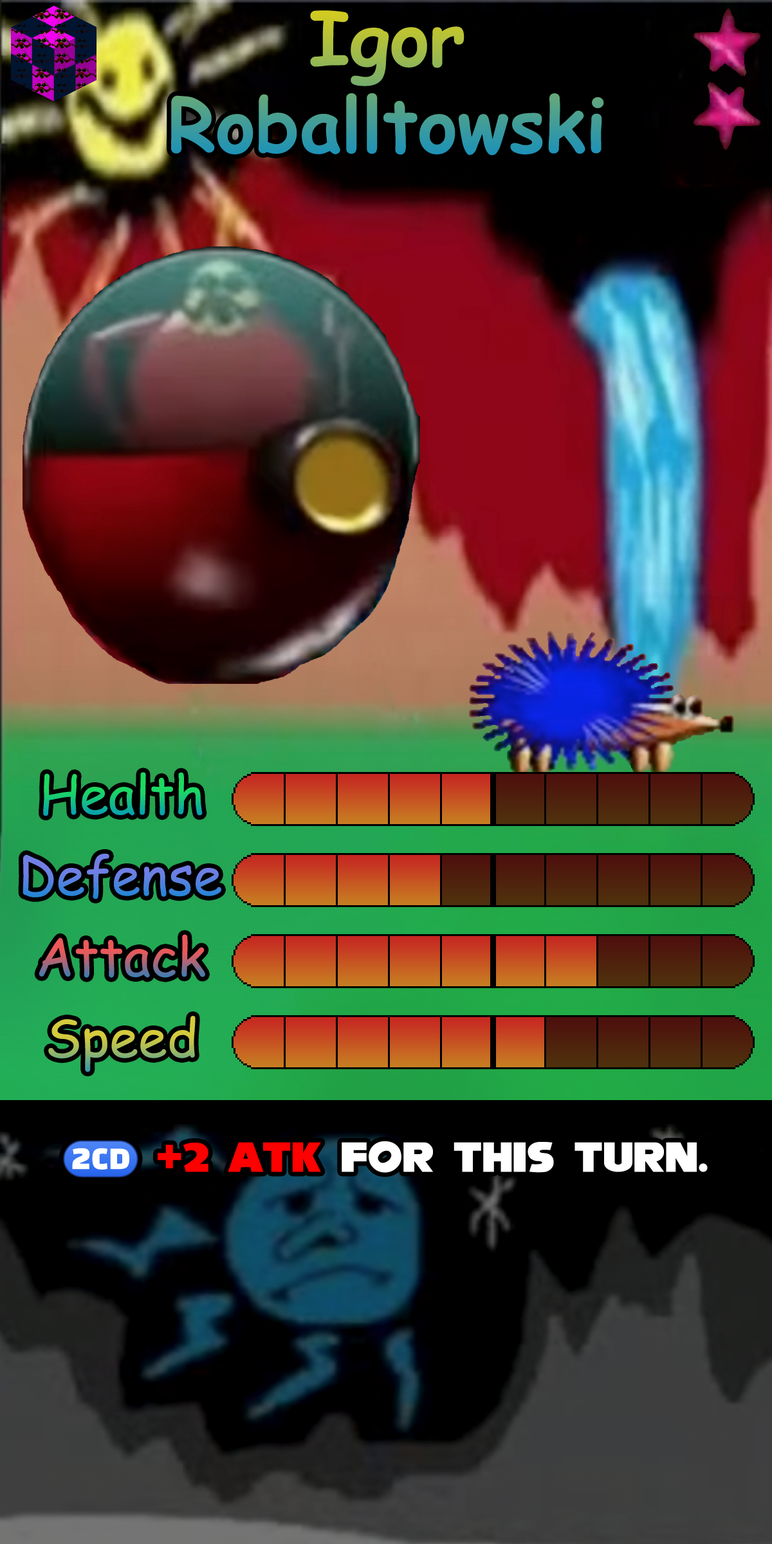
<style>
.page{position:relative;width:772px;height:1544px}
.page>*{position:absolute;margin:0}
.t1{font:128.7px/86.9px "ComicSansMS-Bold"}
.t2{font:90.1px "ComicSansMS"}
.t3{font:64.3px "NiseSegaSonic";color:#ffffff}
.t4{font:64.3px "stoogedings-Regular";color:#ffffff}
.t5{font:64.3px "NiseSegaSonic";color:#ff0000}
</style>
<div class="page">
<p class="t1" style="left:171px;top:10px;width:433px;height:146px;text-align:center">Igor<br>Roballtowski</p>
<p class="t2" style="left:43px;top:772px;width:160px;height:45px">Health</p>
<p class="t2" style="left:23px;top:854px;width:198px;height:46px">Defense</p>
<p class="t2" style="left:39px;top:934px;width:166px;height:44px">Attack</p>
<p class="t2" style="left:48px;top:1016px;width:148px;height:56px">Speed</p>
<p class="t3" style="left:63px;top:1140px;width:645px;height:38px"><span class="t4">(2CD) </span><span class="t5">+2 ATK</span> for this turn.</p>
</div>
